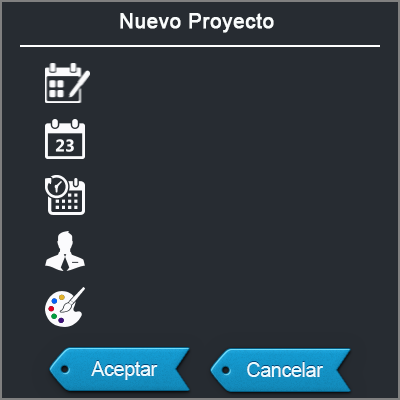
<style>
.page{position:relative;width:400px;height:400px;background:#272c32}
.page>*{position:absolute;margin:0}
.t1{font:19.8px "ArialMT";letter-spacing:0.02em;color:#fafdfd;font-weight:bold}
.t2{font:20px "ArialMT";letter-spacing:-0.025em;color:#eafbff}
</style>
<div class="page">
<p class="t1" style="left:120px;top:13px;width:154px;height:20px">Nuevo Proyecto</p>
<p class="t2" style="left:91px;top:361px;width:67px;height:19px">Aceptar</p>
<p class="t2" style="left:247px;top:362px;width:76px;height:15px">Cancelar</p>
</div>
